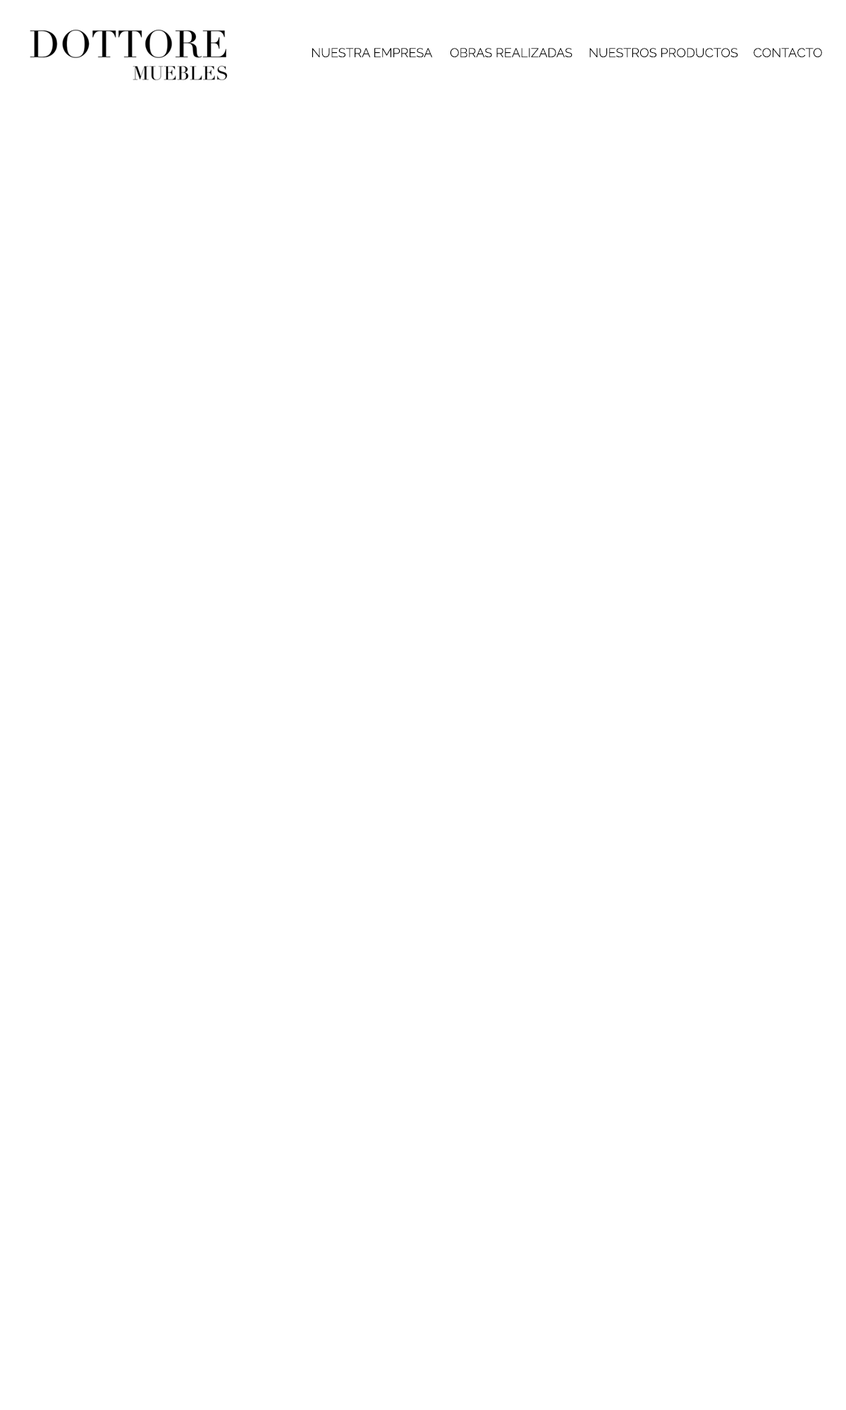
<style>
.page{position:relative;width:846px;height:1410px;background:#ffffff}
.page>*{position:absolute;margin:0}
.t1{font:12.7px "Raleway-Light";color:#000000}
</style>
<div class="page">
<p class="t1" style="left:312px;top:48px;width:121px;height:10px">NUESTRA EMPRESA</p>
<p class="t1" style="left:450px;top:48px;width:122px;height:10px">OBRAS REALIZADAS</p>
<p class="t1" style="left:589px;top:48px;width:149px;height:10px">NUESTROS PRODUCTOS</p>
<p class="t1" style="left:754px;top:48px;width:68px;height:10px">CONTACTO</p>
</div>
